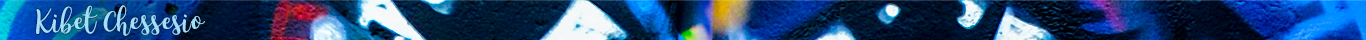
<style>
.page{position:relative;width:1366px;height:40px}
.page>*{position:absolute;margin:0}
.t1{font:25.4px "KingBasilLite-Regular";color:#a3defc}
</style>
<div class="page">
<p class="t1" style="left:36px;top:5px;width:169px;height:31px">Kibet Chessesio</p>
</div>
